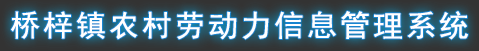
<style>
.page{position:relative;width:479px;height:51px}
.page>*{position:absolute;margin:0}
.t1{font:30px "SimHei";letter-spacing:0.1em;color:#ffffff}
</style>
<div class="page">
<p class="t1" style="left:11px;top:11px;width:457px;height:29px">桥梓镇农村劳动力信息管理系统</p>
</div>
